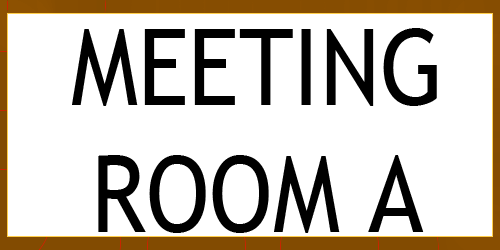
<style>
.page{position:relative;width:500px;height:250px;background:#ffffff}
.page>*{position:absolute;margin:0}
.t1{font:105.5px "TrebuchetMS";color:#000000;scale:0.89 1}
</style>
<div class="page">
<p class="t1" style="left:72px;top:28px;width:365px;height:205px;text-align:center">MEETING<br>ROOM A</p>
</div>
